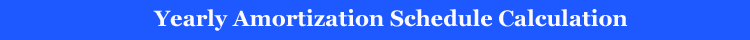
<style>
.page{position:relative;width:750px;height:40px;background:#1e59ff}
.page>*{position:absolute;margin:0}
.t1{font:22px "Georgia-Bold";color:#fbfaff}
</style>
<div class="page">
<p class="t1" style="left:153px;top:9px;width:475px;height:22px">Yearly Amortization Schedule Calculation</p>
</div>
